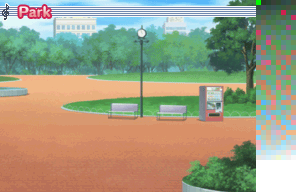
<style>
.page{position:relative;width:296px;height:192px}
.page>*{position:absolute;margin:0}
.t1{font:12px "HummingStd-E";letter-spacing:0.02em}
</style>
<div class="page">
<p class="t1" style="left:19px;top:6px;width:32px;height:11px">Park</p>
</div>
